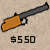
<style>
.page{position:relative;width:50px;height:50px}
.page>*{position:absolute;margin:0}
.t1{font:9px "OCRAStd";color:#121109}
</style>
<div class="page">
<p class="t1" style="left:10px;top:36px;width:26px;height:7px">$550</p>
</div>
